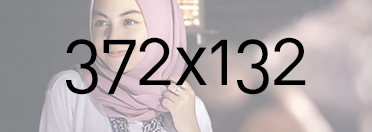
<style>
.page{position:relative;width:372px;height:132px}
.page>*{position:absolute;margin:0}
.t1{font:76px "DIN-RegularAlternate";letter-spacing:-0.025em;color:#000000}
</style>
<div class="page">
<p class="t1" style="left:66px;top:37px;width:240px;height:58px">372x132</p>
</div>
